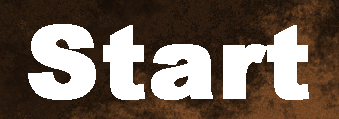
<style>
.page{position:relative;width:339px;height:119px;background:#ffffff}
.page>*{position:absolute;margin:0}
.t1{font:100px "Arial-Black";color:#ffffff;font-weight:bold}
</style>
<div class="page">
<p class="t1" style="left:28px;top:24px;width:281px;height:76px">Start</p>
</div>
